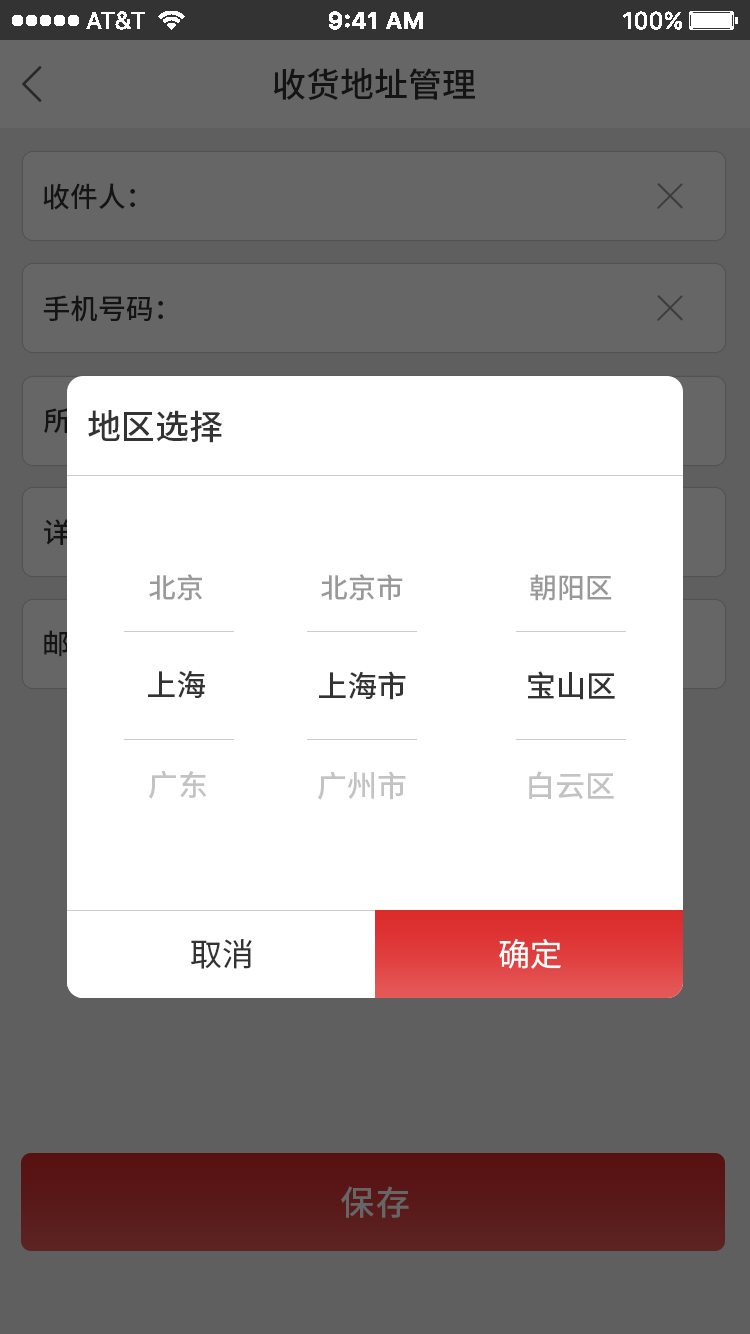
<style>
.page{position:relative;width:750px;height:1334px;background:#ffffff}
.page>*{position:absolute;margin:0}
.t1{font:34px "SourceHanSansCN-Medium";color:#141414}
.t2{font:28px "SourceHanSansCN-Medium";color:#141414}
.t3{font:34px "SourceHanSansCN-Medium";color:#333333}
.t4{font:28px "SourceHanSansCN-Medium";color:#999999}
.t5{font:30px "SourceHanSansCN-Medium";color:#333333}
.t6{font:30px "SourceHanSansCN-Medium";color:#c3c3c3}
.t7{font:32px "SourceHanSansCN-Regular";color:#333333}
.t8{font:32px "SourceHanSansCN-Regular";color:#ffffff}
.t9{font:34px "SourceHanSansCN-Medium";letter-spacing:0.05em;color:#666666}
</style>
<div class="page">
<p class="t1" style="left:273px;top:68px;width:202px;height:32px">收货地址管理</p>
<p class="t2" style="left:43px;top:183px;width:92px;height:27px">收件人：</p>
<p class="t2" style="left:43px;top:295px;width:120px;height:27px">手机号码：</p>
<p class="t3" style="left:88px;top:410px;width:135px;height:33px">地区选择</p>
<p class="t4" style="left:149px;top:574px;width:53px;height:27px">北京</p>
<p class="t4" style="left:321px;top:574px;width:82px;height:27px">北京市</p>
<p class="t4" style="left:530px;top:574px;width:82px;height:27px">朝阳区</p>
<p class="t5" style="left:148px;top:670px;width:57px;height:28px">上海</p>
<p class="t5" style="left:319px;top:671px;width:87px;height:29px">上海市</p>
<p class="t5" style="left:528px;top:671px;width:87px;height:29px">宝山区</p>
<p class="t6" style="left:149px;top:770px;width:58px;height:29px">广东</p>
<p class="t6" style="left:318px;top:771px;width:88px;height:29px">广州市</p>
<p class="t6" style="left:529px;top:771px;width:85px;height:29px">白云区</p>
<p class="t7" style="left:191px;top:939px;width:61px;height:30px">取消</p>
<p class="t8" style="left:499px;top:939px;width:62px;height:30px">确定</p>
<p class="t9" style="left:341px;top:1186px;width:68px;height:32px">保存</p>
</div>
